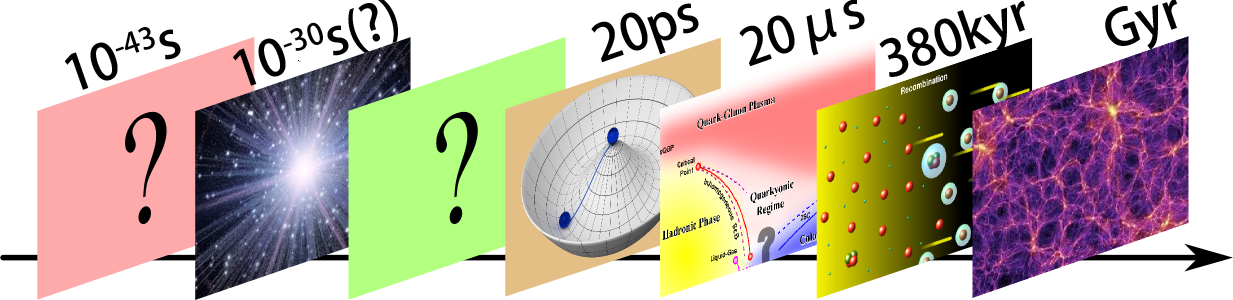
<style>
.page{position:relative;width:1233px;height:300px;background:#ffffff}
.page>*{position:absolute;margin:0}
.t1{font:50px "AdobeHeitiStd-Regular";color:#000000}
</style>
<div class="page">
<p class="t1" style="left:232px;top:0px;width:166px;height:86px;rotate:-19deg">10-30s(?)</p>
<p class="t1" style="left:591px;top:3px;width:108px;height:60px;rotate:-19deg">20ps</p>
<p class="t1" style="left:739px;top:0px;width:126px;height:67px;rotate:-19deg">20μs</p>
<p class="t1" style="left:879px;top:0px;width:147px;height:77px;rotate:-19deg">380kyr</p>
<p class="t1" style="left:1105px;top:0px;width:73px;height:50px;rotate:-19deg">Gyr</p>
<p class="t1" style="left:64px;top:27px;width:117px;height:63px;rotate:-19deg">10-43s</p>
</div>
